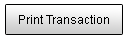
<style>
.page{position:relative;width:128px;height:41px;background:#ffffff}
.page>*{position:absolute;margin:0}
.t1{font:12px "ArialMT";color:#000000}
</style>
<div class="page">
<p class="t1" style="left:19px;top:15px;width:90px;height:9px">Print Transaction</p>
</div>
